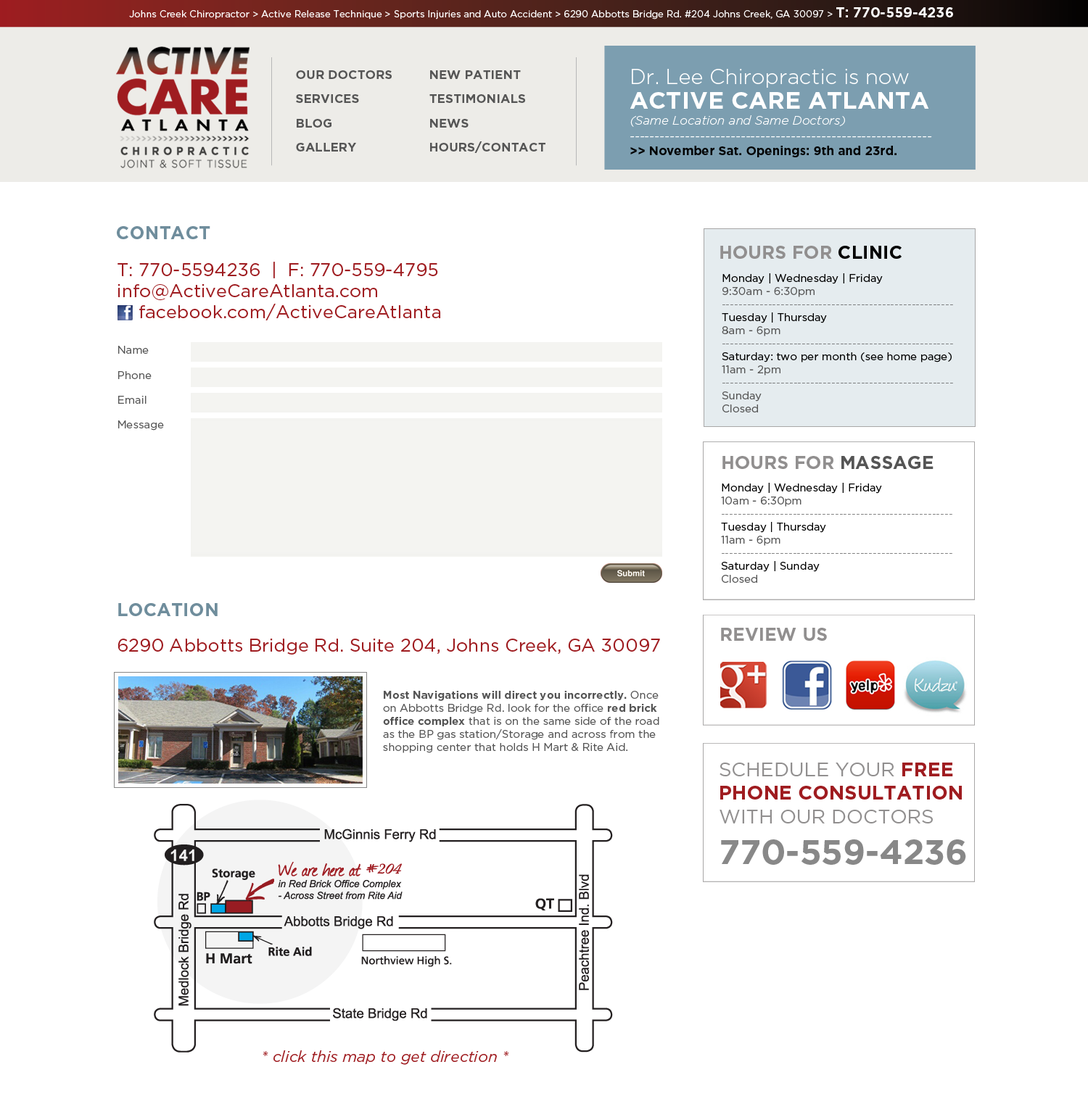
<style>
.page{position:relative;width:1088px;height:1096px;background:#ffffff}
.page>*{position:absolute;margin:0}
.t1{font:9.4px "GothamHTF-Book";color:#ffffff}
.t2{font:13.8px "GothamHTF-Bold";color:#ffffff}
.t3{font:12.3px "GothamHTF-Bold";color:#555555}
.t4{font:12.3px/16px "GothamHTF-LightItalic";color:#ffffff}
.t5{font:21px/21.7px "GothamHTF-Light";color:#ffffff}
.t6{font:23.9px/24.7px "GothamHTF-Bold";color:#ffffff}
.t7{font:12.3px/14.5px "GothamHTF-Bold";color:#000000}
.t8{font:18.1px "GothamHTF-Bold";color:#6f8d9c}
.t9{font:18.1px "GothamHTF-Bold";color:#918f8f}
.t10{font:18.1px "GothamHTF-Bold";color:#000000}
.t11{font:18.1px/21px "GothamHTF-Book";color:#9f1c20}
.t12{font:18.1px "GothamHTF-Book";color:#9f1c20}
.t13{font:10.9px "GothamHTF-Thin";color:#555555}
.t14{font:10.9px "GothamHTF-Book";color:#000000}
.t15{font:10.9px "GothamHTF-Book";color:#555555}
.t16{font:18.1px "GothamHTF-Bold";color:#555555}
.t17{font:10.9px "GothamHTF-Bold";color:#555555}
.t18{font:19.6px "GothamHTF-Bold";color:#9f1c20}
.t19{font:19.6px "GothamHTF-Book";color:#918f8f}
.t20{font:34.1px "GothamHTF-Bold";color:#888888}
.t21{font:15.2px "GothamHTF-BookItalic";color:#9f1c20}
</style>
<div class="page">
<p class="t1" style="left:129px;top:7px;width:824px;height:13px">Johns Creek Chiropractor &gt; Active Release Technique &gt; Sports Injuries and Auto Accident &gt; 6290 Abbotts Bridge Rd. #204 Johns Creek, GA 30097 &gt; <span class="t2">T: 770-559-4236</span></p>
<p class="t3" style="left:296px;top:70px;width:96px;height:9px">OUR DOCTORS</p>
<p class="t3" style="left:430px;top:70px;width:91px;height:9px">NEW PATIENT</p>
<p class="t4" style="left:629px;top:69px;width:303px;height:88px"><span class="t5">Dr. Lee Chiropractic is now <br></span><span class="t6">ACTIVE CARE ATLANTA<br></span>(Same Location and Same Doctors)<br>------------------------------------------------------------<br><span class="t7">&gt;&gt; November Sat. Openings: 9th and 23rd.</span></p>
<p class="t3" style="left:296px;top:94px;width:63px;height:9px">SERVICES</p>
<p class="t3" style="left:429px;top:94px;width:96px;height:9px">TESTIMONIALS</p>
<p class="t3" style="left:297px;top:119px;width:34px;height:9px">BLOG</p>
<p class="t3" style="left:430px;top:119px;width:38px;height:9px">NEWS</p>
<p class="t3" style="left:296px;top:143px;width:60px;height:9px">GALLERY</p>
<p class="t3" style="left:430px;top:141px;width:115px;height:12px">HOURS/CONTACT</p>
<p class="t8" style="left:117px;top:226px;width:93px;height:13px">CONTACT</p>
<p class="t9" style="left:720px;top:246px;width:181px;height:13px">HOURS FOR <span class="t10">CLINIC</span></p>
<p class="t11" style="left:117px;top:262px;width:324px;height:58px"><span class="t12">T: 770-5594236  |  F: 770-559-4795<br></span>info@ActiveCareAtlanta.com<br>    facebook.com/ActiveCareAtlanta</p>
<p class="t13" style="left:721px;top:273px;width:232px;height:140px"><span class="t14">Monday | Wednesday | Friday <br></span><span class="t15">9:30am - 6:30pm<br></span>-------------------------------------------------------<br><span class="t14">Tuesday | Thursday<br></span><span class="t15">8am - 6pm<br></span>-------------------------------------------------------<br><span class="t14">Saturday: two per month (see home page)<br></span><span class="t15">11am - 2pm<br></span>-------------------------------------------------------<br><span class="t15">Sunday           <br>Closed</span></p>
<p class="t15" style="left:118px;top:346px;width:31px;height:8px">Name</p>
<p class="t15" style="left:118px;top:371px;width:34px;height:8px">Phone</p>
<p class="t15" style="left:118px;top:396px;width:28px;height:8px">Email</p>
<p class="t15" style="left:118px;top:421px;width:46px;height:10px">Message</p>
<p class="t9" style="left:722px;top:456px;width:211px;height:13px">HOURS FOR <span class="t16">MASSAGE</span></p>
<p class="t13" style="left:721px;top:483px;width:231px;height:100px"><span class="t14">Monday | Wednesday | Friday <br></span><span class="t15">10am - 6:30pm<br></span>-------------------------------------------------------<br><span class="t14">Tuesday | Thursday<br></span><span class="t15">11am - 6pm<br></span>-------------------------------------------------------<br><span class="t14">Saturday | Sunday           <br></span><span class="t15">Closed</span></p>
<p class="t8" style="left:118px;top:603px;width:100px;height:13px">LOCATION</p>
<p class="t9" style="left:721px;top:628px;width:106px;height:13px">REVIEW US</p>
<p class="t12" style="left:117px;top:639px;width:543px;height:16px">6290 Abbotts Bridge Rd. Suite 204, Johns Creek, GA 30097</p>
<p class="t15" style="left:383px;top:691px;width:276px;height:62px"><span class="t17">Most Navigations will direct you incorrectly.</span> Once on Abbotts Bridge Rd. look for the office <span class="t17">red brick office complex</span> that is on the same side of the road as the BP gas station/Storage and across from the shopping center that holds H Mart &amp; Rite Aid.</p>
<p class="t18" style="left:719px;top:763px;width:247px;height:102px"><span class="t19">SCHEDULE YOUR </span>FREE PHONE CONSULTATION <span class="t19">WITH OUR DOCTORS<br></span><span class="t20">770-559-4236</span></p>
<p class="t21" style="left:262px;top:1051px;width:247px;height:14px">* click this map to get direction *</p>
</div>
